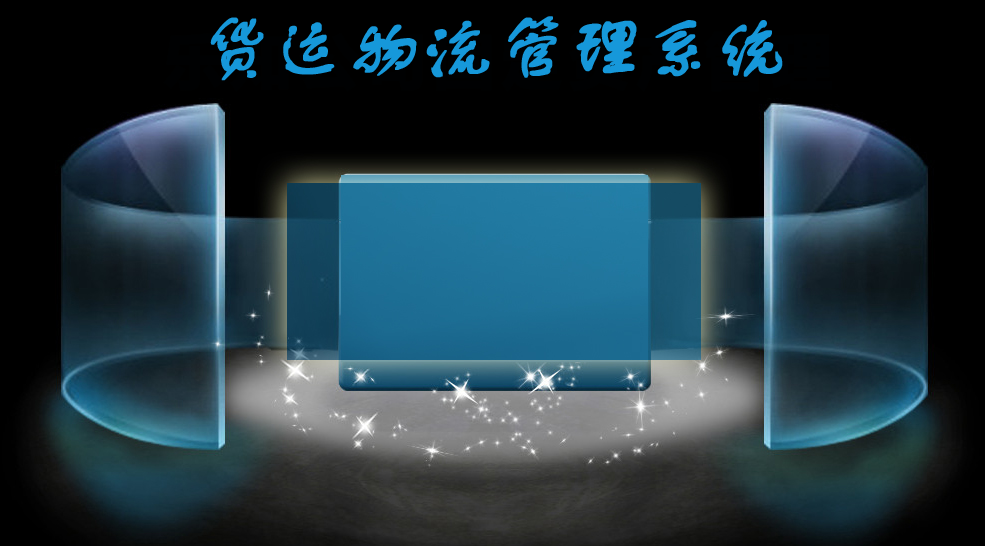
<style>
.page{position:relative;width:985px;height:546px;background:#000000}
.page>*{position:absolute;margin:0}
.t1{font:72px "FZSTK--GBK1-0";color:#1698da;font-weight:bold}
</style>
<div class="page">
<p class="t1" style="left:210px;top:16px;width:573px;height:65px">货运物流管理系统</p>
</div>
